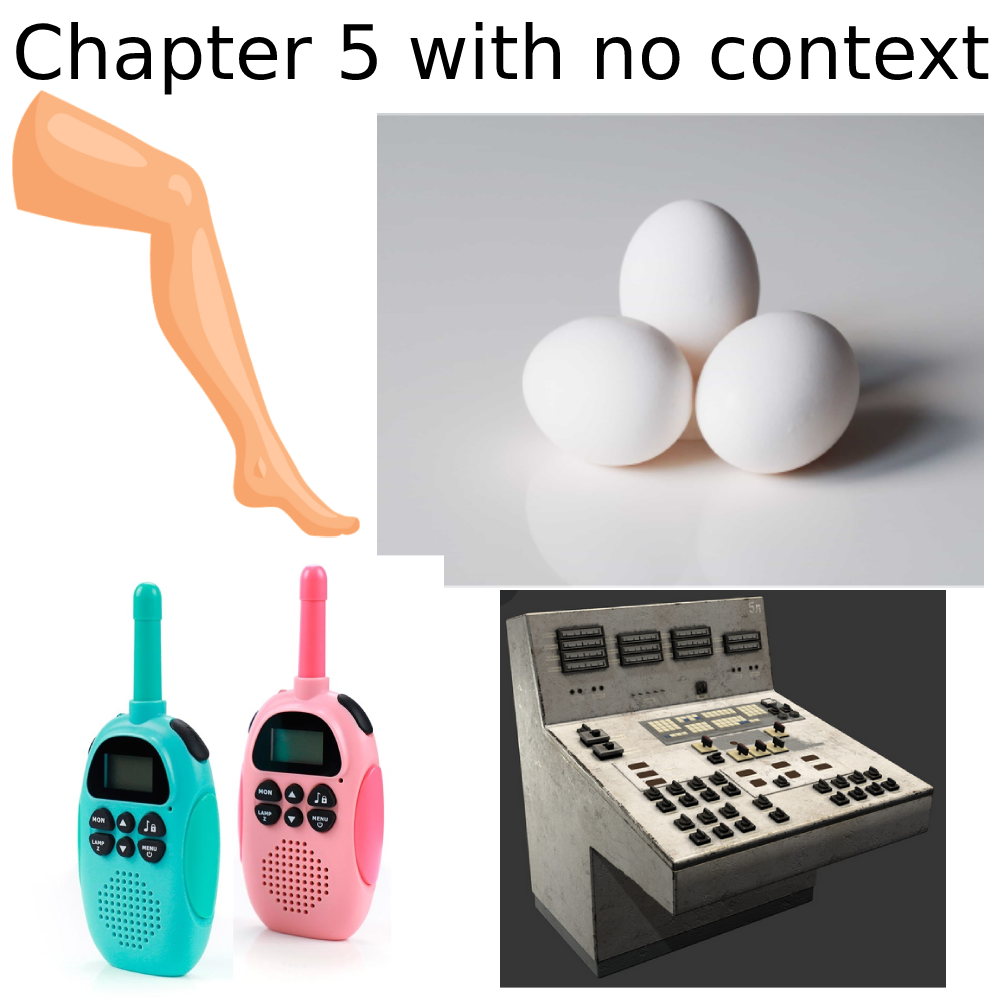
<style>
.page{position:relative;width:1000px;height:1000px;background:#ffffff}
.page>*{position:absolute;margin:0}
.t1{font:75px "DejaVuSans";color:#000000}
</style>
<div class="page">
<p class="t1" style="left:16px;top:22px;width:973px;height:73px">Chapter 5 with no context</p>
</div>
